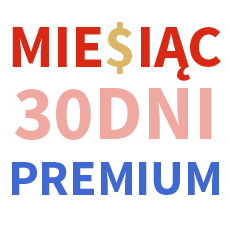
<style>
.page{position:relative;width:230px;height:230px;background:#ffffff}
.page>*{position:absolute;margin:0}
.t1{font:60px "SourceSansPro-Bold";color:#d92915}
.t2{font:60px "SourceSansPro-Bold";color:#dbb664}
.t3{font:77px "SourceSansPro-Bold";color:#f0a9a1}
.t4{font:50px "SourceSansPro-Bold";color:#4068d3}
</style>
<div class="page">
<p class="t1" style="left:12px;top:22px;width:209px;height:59px">MIE<span class="t2">$</span>IĄC</p>
<p class="t3" style="left:15px;top:88px;width:197px;height:52px">30DNI</p>
<p class="t4" style="left:12px;top:162px;width:207px;height:33px">PREMIUM</p>
</div>
